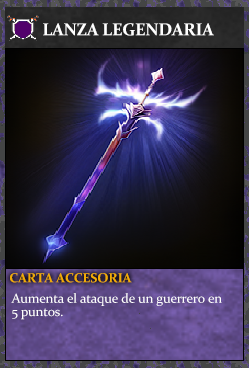
<style>
.page{position:relative;width:249px;height:368px}
.page>*{position:absolute;margin:0}
.t1{font:17.3px "Constantia-Bold";letter-spacing:-0.02em;color:#ffffff}
.t2{font:13.3px "Constantia-Bold";letter-spacing:-0.02em;color:#f2ac05}
.t3{font:13.3px/13.3px "Constantia";letter-spacing:-0.02em;color:#ffffff}
</style>
<div class="page">
<p class="t1" style="left:43px;top:23px;width:171px;height:13px">LANZA LEGENDARIA</p>
<p class="t2" style="left:10px;top:273px;width:122px;height:10px">CARTA ACCESORIA</p>
<p class="t3" style="left:11px;top:293px;width:211px;height:27px">Aumenta el ataque de un guerrero en<br>5 puntos.</p>
</div>
